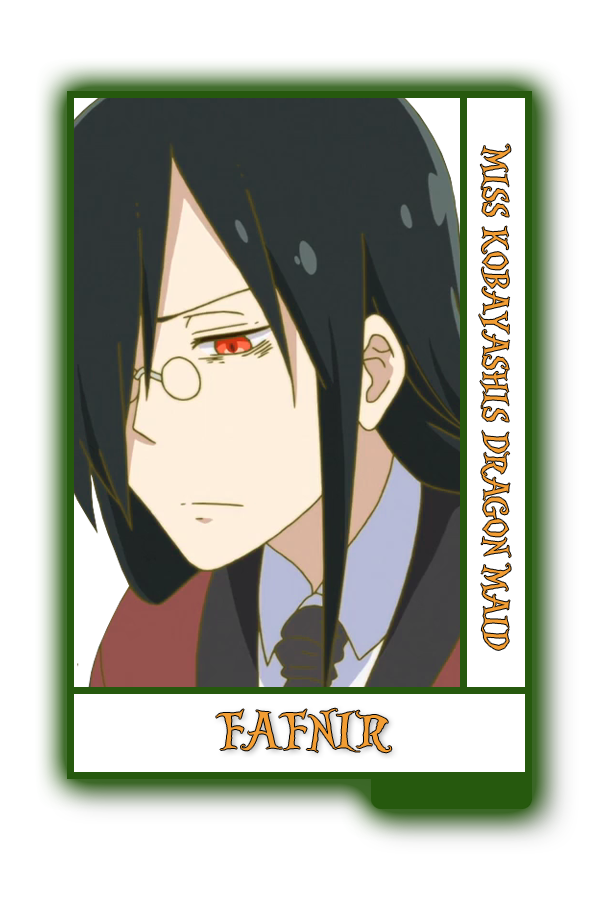
<style>
.page{position:relative;width:600px;height:900px;background:#ffffff}
.page>*{position:absolute;margin:0}
.t1{font:37.3px "AliceinWonderland";color:#f29d33}
.t2{font:56px "AliceinWonderland";color:#f29d33}
</style>
<div class="page">
<p class="t1" style="left:479px;top:144px;width:32px;height:506px;rotate:90deg">MISS KOBAYASHIS DRAGON MAID</p>
<p class="t2" style="left:216px;top:708px;width:176px;height:45px">FAFNIR</p>
</div>
